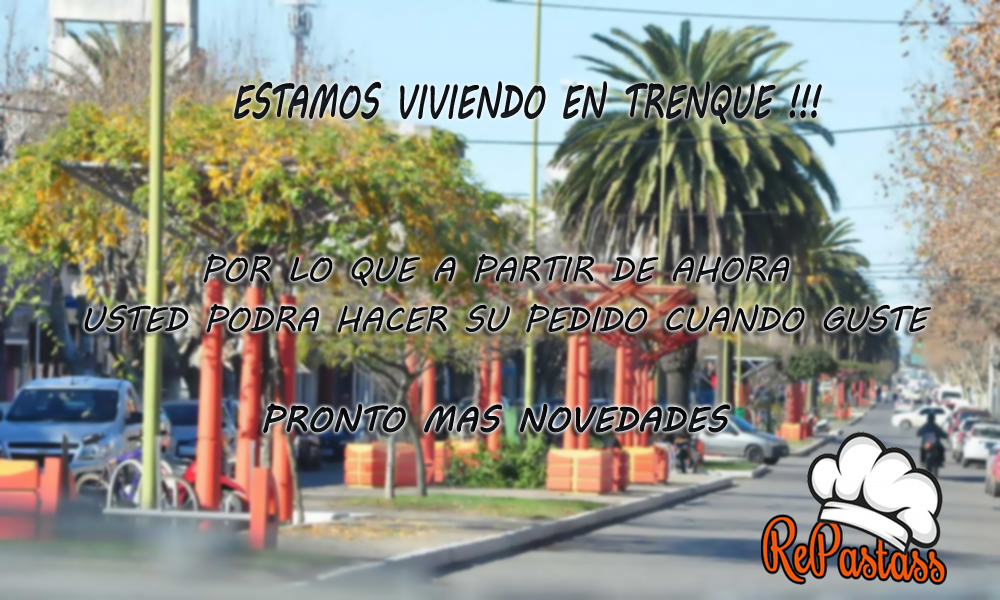
<style>
.page{position:relative;width:1000px;height:600px}
.page>*{position:absolute;margin:0}
.t1{font:77.5px "MVBoli";color:#1e232a;text-transform:uppercase;font-weight:bold;scale:0.69 1}
.t2{font:58.3px/50px "MVBoli";color:#0b0d0f;text-transform:uppercase}
.t3{font:58.3px/50px "MVBoli";color:#0b0d0f;text-transform:uppercase;font-weight:bold}
</style>
<div class="page">
<p class="t1" style="left:234px;top:81px;width:588px;height:44px">estamos viviendo en trenque !!!</p>
<p class="t2" style="left:84px;top:254px;width:847px;height:179px;text-align:center">POR LO QUE A PARTIR DE AHORA <br>USTED PODRA HACER SU PEDIDO CUANDO GUSTE<br><span class="t3"> <br>PRONTO MAS NOVEDADES</span></p>
</div>
